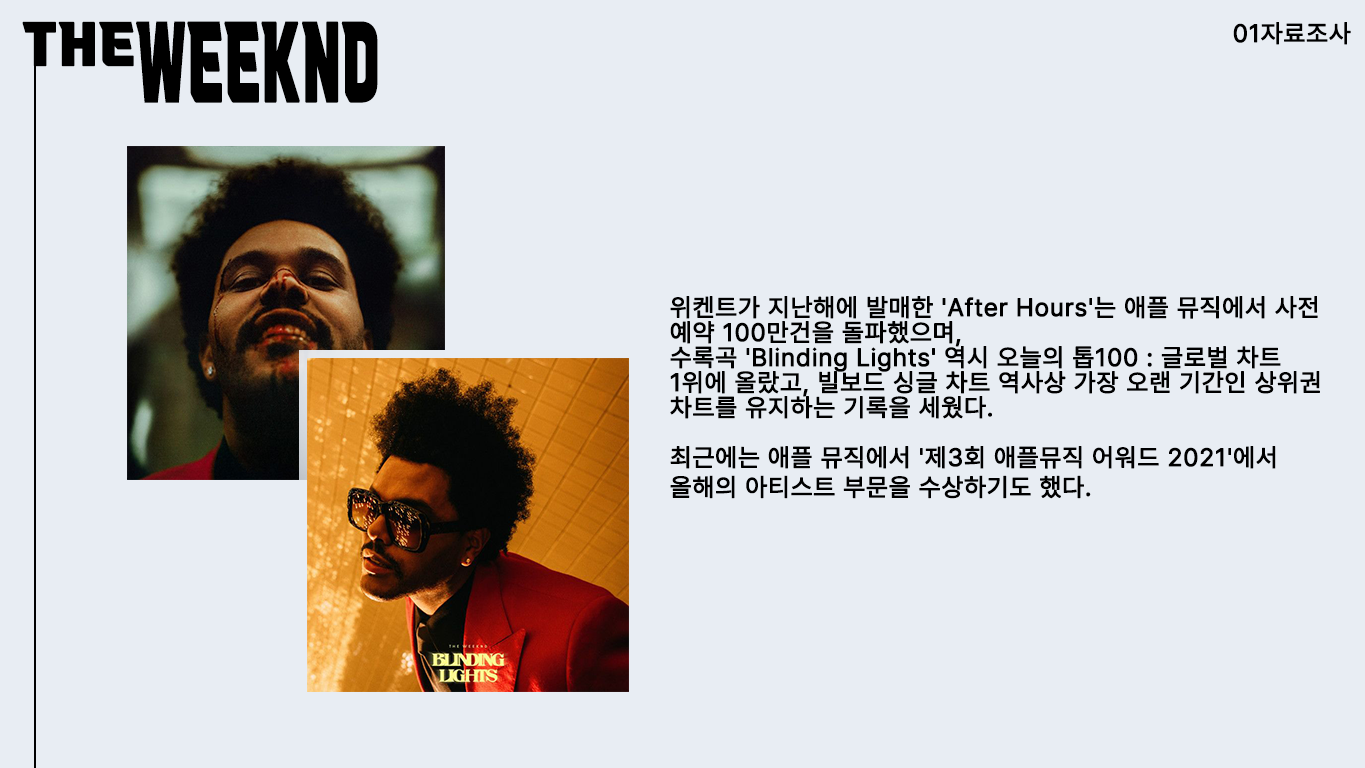
<style>
.page{position:relative;width:1365px;height:768px;background:#e8edf3}
.page>*{position:absolute;margin:0}
.t1{font:50px "VITRO-CORE-TTF";letter-spacing:0.03em;color:#000000;font-weight:bold}
.t2{font:91.5px "VITRO-CORE-TTF";letter-spacing:0.03em;color:#000000;font-weight:bold;scale:0.55 1}
.t3{font:25px "Pretendard-Regular";letter-spacing:0.03em;color:#000000;font-weight:bold}
.t4{font:25px/25px "Pretendard-Regular";letter-spacing:0.03em;color:#000000;font-weight:bold}
</style>
<div class="page">
<p class="t1" style="left:22px;top:21px;width:112px;height:46px">THE</p>
<p class="t2" style="left:136px;top:21px;width:242px;height:82px">WEEKND</p>
<p class="t3" style="left:1233px;top:22px;width:118px;height:23px">01자료조사</p>
<p class="t4" style="left:670px;top:296px;width:650px;height:203px">위켄트가 지난해에 발매한 'After Hours'는 애플 뮤직에서 사전 <br>예약 100만건을 돌파했으며,<br>수록곡 'Blinding Lights' 역시 오늘의 톱100 : 글로벌 차트<br>1위에 올랐고, 빌보드 싱글 차트 역사상 가장 오랜 기간인 상위권<br>차트를 유지하는 기록을 세웠다.<br><br>최근에는 애플 뮤직에서 '제3회 애플뮤직 어워드 2021'에서<br>올해의 아티스트 부문을 수상하기도 했다.</p>
</div>
